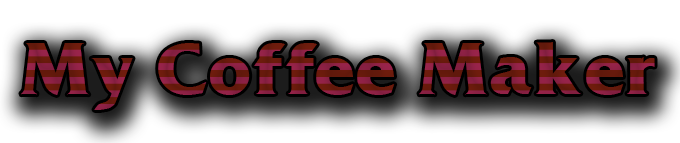
<style>
.page{position:relative;width:680px;height:143px;background:#ffffff}
.page>*{position:absolute;margin:0}
.t1{font:68px "FrizQuadrataBold"}
</style>
<div class="page">
<p class="t1" style="left:21px;top:42px;width:634px;height:68px">My Coffee Maker</p>
</div>
